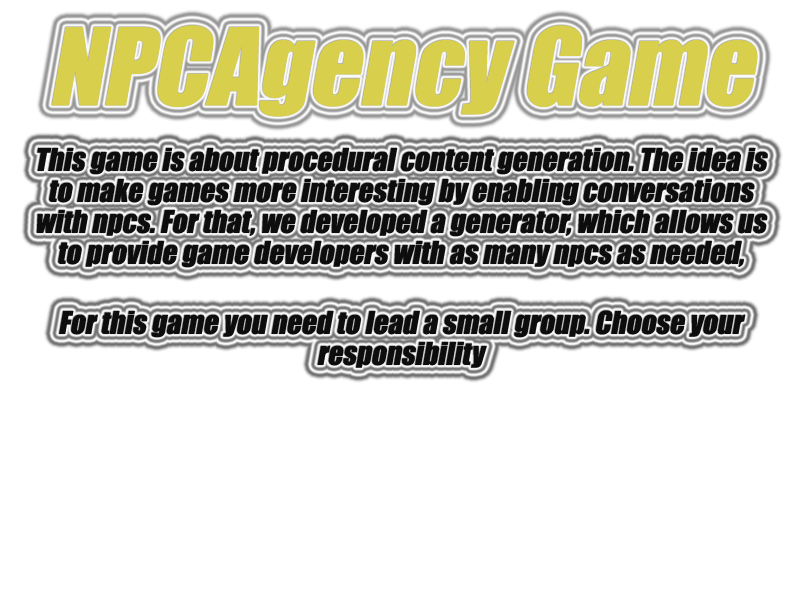
<style>
.page{position:relative;width:800px;height:600px;background:#ffffff}
.page>*{position:absolute;margin:0}
.t1{font:99px "Impact";color:#d8cf4c;font-style:italic}
.t2{font:29px/31px "Impact";color:#000000;font-style:italic}
</style>
<div class="page">
<p class="t1" style="left:51px;top:25px;width:707px;height:92px">NPCAgency Game</p>
<p class="t2" style="left:36px;top:148px;width:732px;height:120px;text-align:center;opacity:0.95">This game is about procedural content generation. The idea is to make games more interesting by enabling conversations with npcs. For that, we developed a generator, which allows us to provide game developers with as many npcs as needed, generated based on choosen traits.</p>
<p class="t2" style="left:59px;top:310px;width:687px;height:58px;text-align:center;opacity:0.95">For this game you need to lead a small group. Choose your responsibility</p>
</div>
